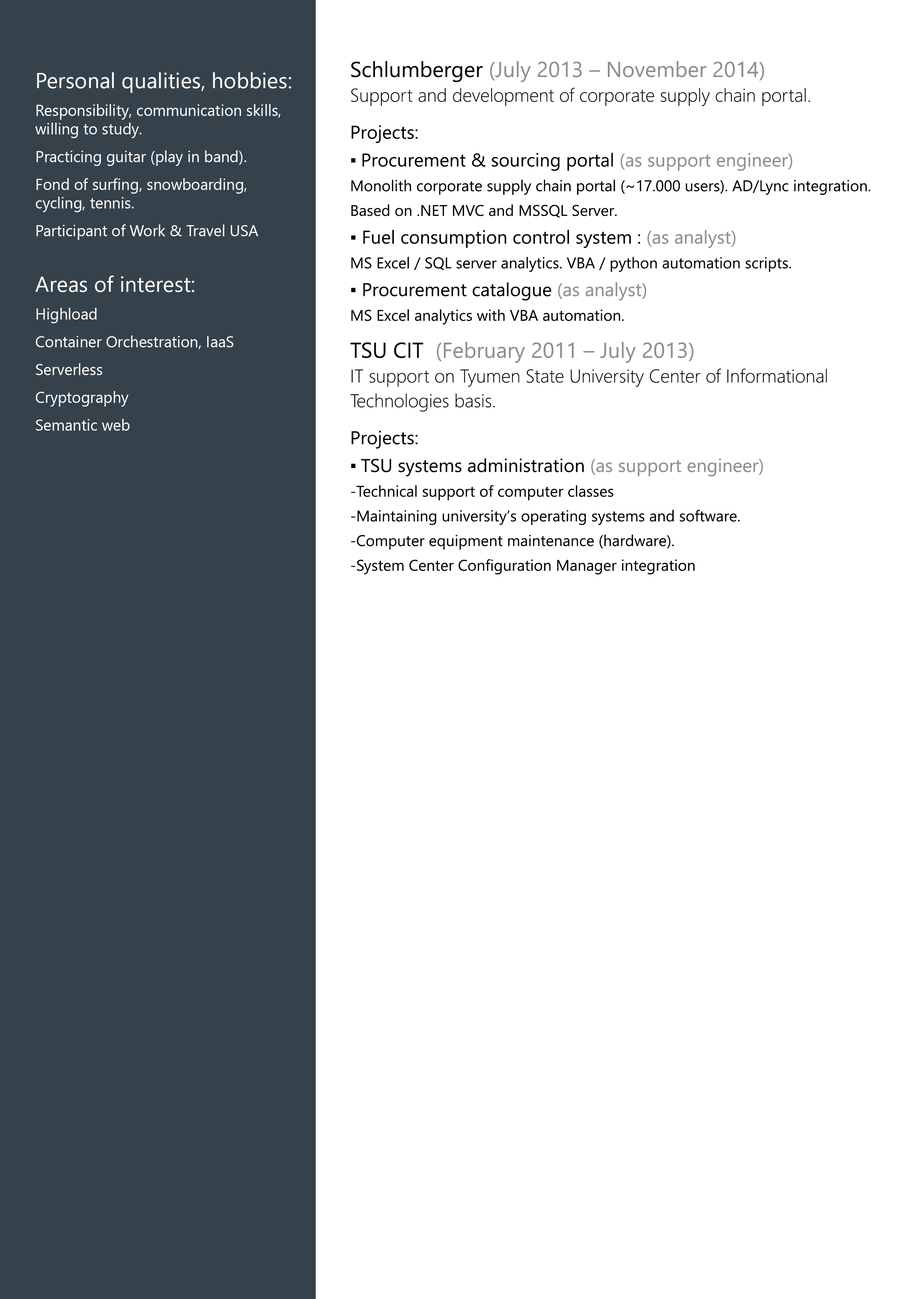
<style>
.page{position:relative;width:918px;height:1299px;background:#ffffff}
.page>*{position:absolute;margin:0}
.t1{font:15.4px/24.7px "SegoeUI";color:#000000}
.t2{font:21.6px/27.8px "SegoeUI";color:#000000}
.t3{font:21.6px/27.8px "SegoeUI";color:#8f8f8f}
.t4{font:18.5px/24.7px "SegoeUI-Light";color:#000000}
.t5{font:18.5px/37px "SegoeUI";color:#000000}
.t6{font:18.5px/27.8px "SegoeUI";color:#000000}
.t7{font:18.5px/27.8px "SegoeUI";color:#8f8f8f}
.t8{font:18.5px/24.7px "SegoeUI";color:#000000}
.t9{font:21.6px/37px "SegoeUI";color:#000000}
.t10{font:21.6px/37px "SegoeUI";color:#8f8f8f}
.t11{font:15.4px/27.8px "SegoeUI";color:#ffffff}
.t12{font:21.6px/27.8px "SegoeUI";color:#ffffff}
.t13{font:15.4px "SegoeUI";color:#ffffff}
</style>
<div class="page">
<p class="t1" style="left:350px;top:61px;width:521px;height:514px"><span class="t2">Schlumberger </span><span class="t3">(July 2013 – November 2014)<br></span><span class="t4">Support and development of corporate supply chain portal.<br></span><span class="t5">Projects:<br></span><span class="t6">▪ Procurement &amp; sourcing portal</span><span class="t7"> (as support engineer) <br></span>Monolith corporate supply chain portal (~17.000 users). AD/Lync integration. <br>Based on .NET MVC and MSSQL Server.<br><span class="t6">▪ Fuel consumption control system : </span><span class="t7">(as analyst) <br></span>MS Excel / SQL server analytics. VBA / python automation scripts.<br><span class="t8">▪ </span><span class="t6">Procurement catalogue </span><span class="t7">(as analyst) <br></span>MS Excel analytics with VBA automation.<br><span class="t9">TSU CIT  </span><span class="t10">(February 2011 – July 2013)<br></span><span class="t4">IT support on Tyumen State University Center of Informational <br>Technologies basis. <br></span><span class="t5">Projects:<br></span><span class="t6">▪ TSU systems administration</span><span class="t7"> (as support engineer) <br></span>-Technical support of computer classes<br>-Maintaining university’s operating systems and software. <br>-Computer equipment maintenance (hardware).<br>-System Center Configuration Manager integration</p>
<p class="t11" style="left:35px;top:72px;width:256px;height:359px"><span class="t12">Personal qualities, hobbies:<br></span>Responsibility, communication skills, <br><span class="t13">willing to study.<br></span>Practicing guitar (play in band). <br>Fond of surfing, snowboarding, <br><span class="t13">cycling, tennis. <br></span>Participant of Work &amp; Travel USA<br><br><span class="t12">Areas of interest:<br></span>Highload<br>Container Orchestration, IaaS<br>Serverless<br>Cryptography<br>Semantic web</p>
</div>
